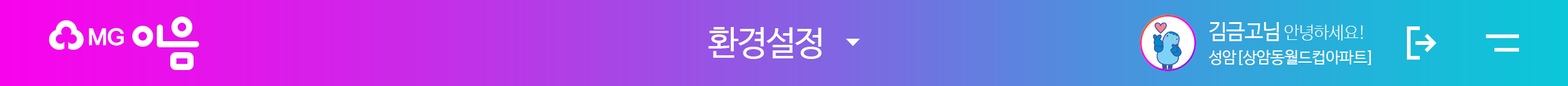
<style>
.page{position:relative;width:1568px;height:86px}
.page>*{position:absolute;margin:0}
.t1{font:34.3px "NanumBarunGothic";letter-spacing:-0.05em;color:#ffffff}
.t2{font:15.9px/24.5px "NanumBarunGothic";letter-spacing:-0.025em;color:#ffffff}
.t3{font:20.8px/24.5px "NanumBarunGothic";letter-spacing:-0.025em;color:#ffffff}
.t4{font:17.2px/24.5px "NanumBarunGothicLight";letter-spacing:-0.025em;color:#ffffff}
</style>
<div class="page">
<p class="t1" style="left:708px;top:27px;width:114px;height:32px">환경설정</p>
<p class="t2" style="left:1208px;top:22px;width:163px;height:43px"><span class="t3">김금고님 </span><span class="t4">안녕하세요!<br></span>성암[상암동월드컵아파트]</p>
</div>
